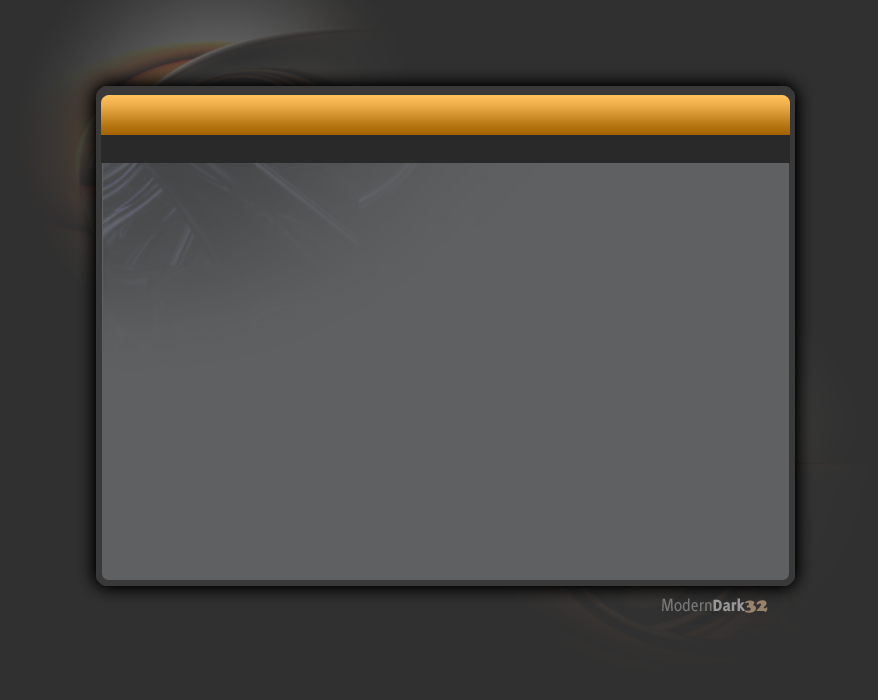
<style>
.page{position:relative;width:878px;height:700px;background:#5e6061}
.page>*{position:absolute;margin:0}
.t1{font:18px "MyriadWebPro-Condensed"}
.t2{font:18px "Delicious-Heavy"}
.t3{font:18px "CooperBlackStd"}
</style>
<div class="page">
<p class="t1" style="left:662px;top:598px;width:106px;height:15px">Modern<span class="t2">Dark</span><span class="t3">32</span></p>
</div>
